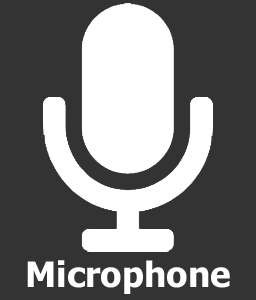
<style>
.page{position:relative;width:256px;height:300px;background:#333333}
.page>*{position:absolute;margin:0}
.t1{font:35px "Tahoma-Bold";color:#ffffff}
</style>
<div class="page">
<p class="t1" style="left:27px;top:260px;width:203px;height:34px">Microphone</p>
</div>
